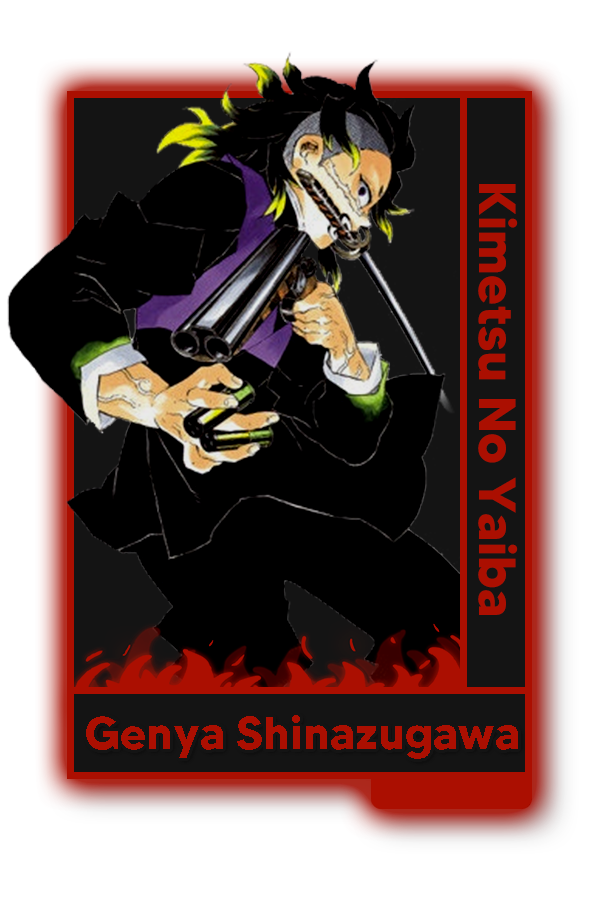
<style>
.page{position:relative;width:600px;height:900px;background:#ffffff}
.page>*{position:absolute;margin:0}
.t1{font:52px "MADETOMMY-Bold";color:#ab0f01}
.t2{font:45.6px "MADETOMMY-Bold";color:#ab0f01}
</style>
<div class="page">
<p class="t1" style="left:478px;top:184px;width:40px;height:431px;rotate:90deg">Kimetsu No Yaiba</p>
<p class="t2" style="left:86px;top:715px;width:432px;height:44px">Genya Shinazugawa</p>
</div>
